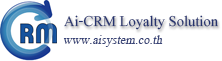
<style>
.page{position:relative;width:222px;height:61px;background:#ffffff}
.page>*{position:absolute;margin:0}
.t1{font:22.2px "AngsanaUPC";color:#26346f}
.t2{font:18.6px "AngsanaNew";color:#3a4578;font-style:italic}
</style>
<div class="page">
<p class="t1" style="left:64px;top:15px;width:154px;height:15px">Ai-CRM Loyalty Solution</p>
<p class="t2" style="left:63px;top:35px;width:100px;height:12px">www.aisystem.co.th</p>
</div>
